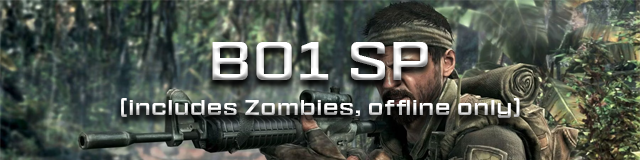
<style>
.page{position:relative;width:640px;height:160px}
.page>*{position:absolute;margin:0}
.t1{font:50px "HitmarkerNormal-Regular";letter-spacing:0.12em;color:#ffffff}
.t2{font:20px "HitmarkerNormal-Regular";letter-spacing:0.12em}
</style>
<div class="page">
<p class="t1" style="left:212px;top:42px;width:216px;height:38px">BO1 SP</p>
<p class="t2" style="left:121px;top:98px;width:399px;height:20px">(includes Zombies, offline only)</p>
</div>
